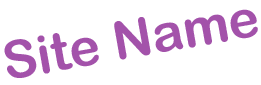
<style>
.page{position:relative;width:261px;height:85px;background:#ffffff}
.page>*{position:absolute;margin:0}
.t1{font:52.2px "ArialRoundedMTBold";color:#a352aa}
</style>
<div class="page">
<p class="t1" style="left:4px;top:9px;width:254px;height:69px;rotate:-10deg">Site Name</p>
</div>
